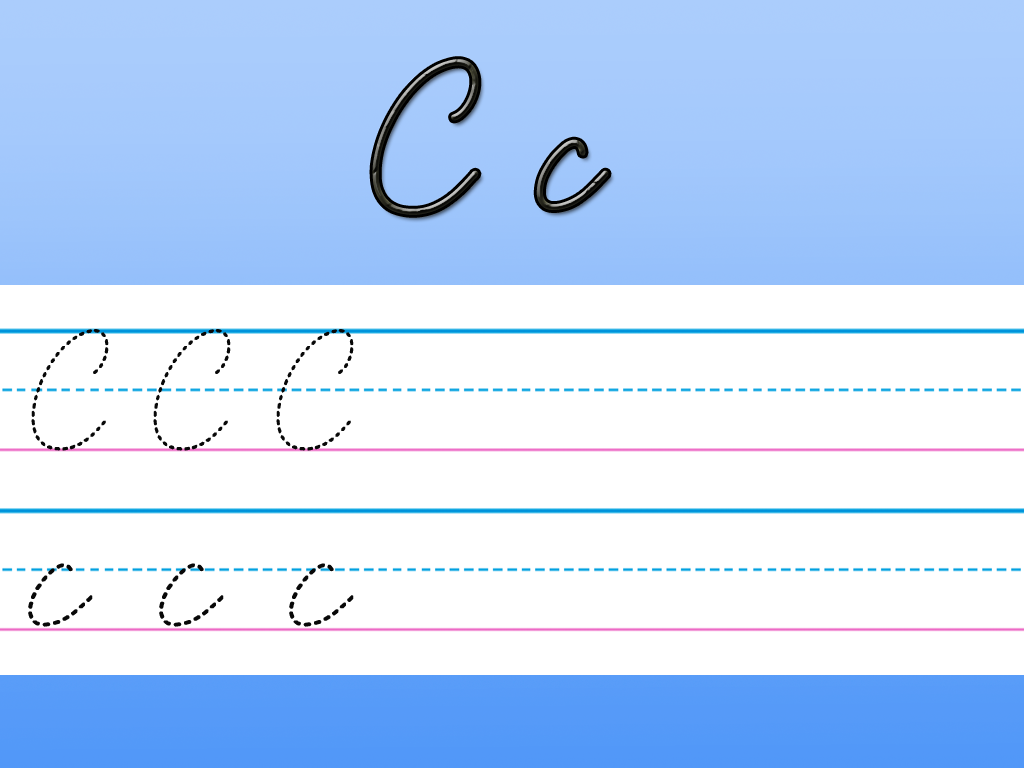
<style>
.page{position:relative;width:1024px;height:768px;background:#ffffff}
.page>*{position:absolute;margin:0}
.t1{font:260px "LearningCurve"}
.t2{font:205.6px "LearningCurveDashed";color:#080808;scale:0.94 1}
.t3{font:241.7px "LearningCurveDashed";color:#080808;scale:1.06 1}
</style>
<div class="page">
<p class="t1" style="left:372px;top:59px;width:237px;height:156px">C c</p>
<p class="t2" style="left:31px;top:329px;width:323px;height:122px">C C C</p>
<p class="t3" style="left:28px;top:563px;width:326px;height:64px">c c c</p>
</div>
